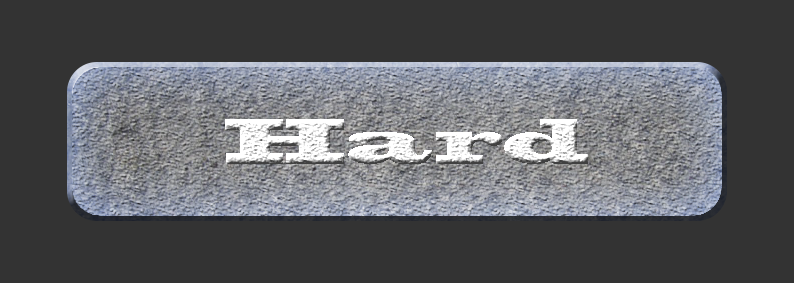
<style>
.page{position:relative;width:794px;height:283px;background:#333333}
.page>*{position:absolute;margin:0}
.t1{font:60px "BlackoakStd";color:#ffffff}
</style>
<div class="page">
<p class="t1" style="left:225px;top:119px;width:363px;height:45px">Hard</p>
</div>
